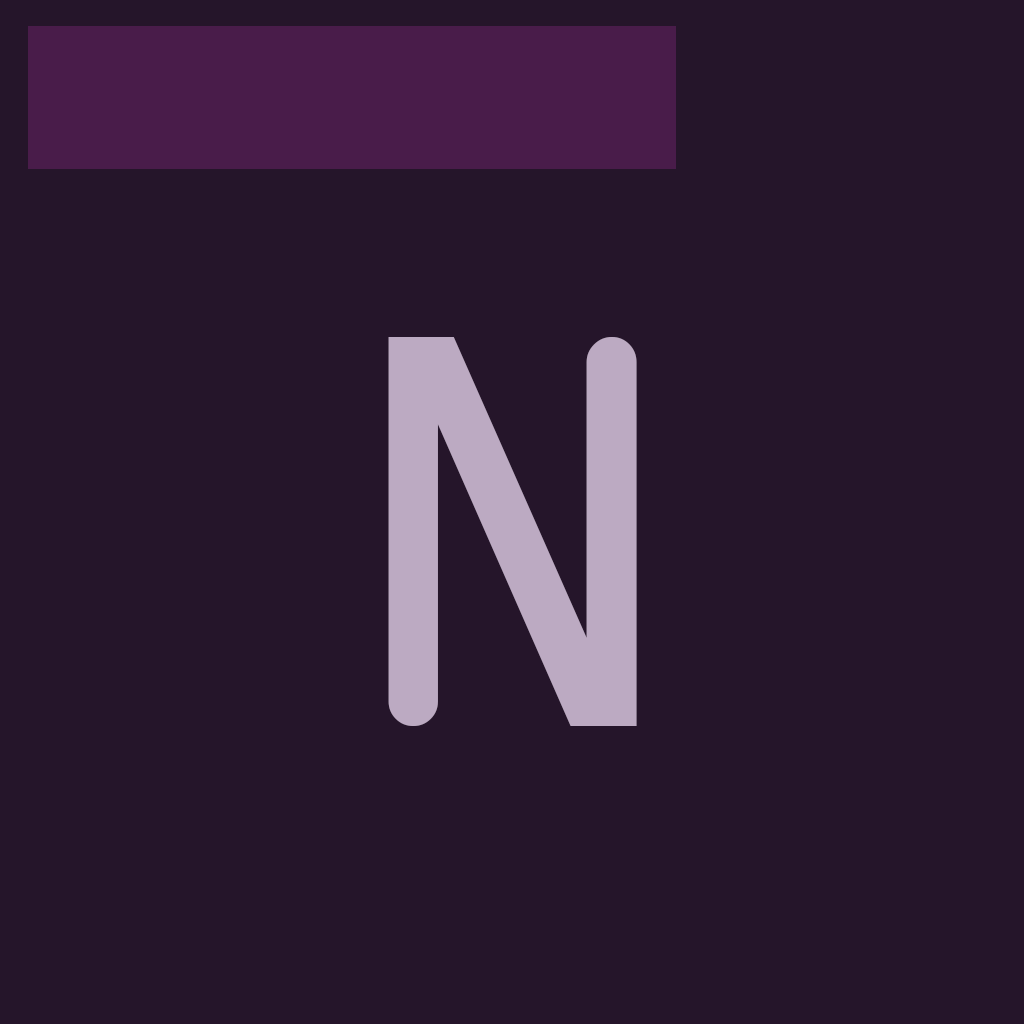
<style>
.page{position:relative;width:1024px;height:1024px;background:#25152a}
.page>*{position:absolute;margin:0}
.t1{font:599.9px "OCRAExtended";color:#bcaac2}
</style>
<div class="page">
<p class="t1" style="left:388px;top:337px;width:249px;height:389px">N</p>
</div>
